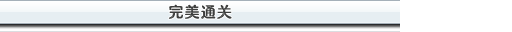
<style>
.page{position:relative;width:512px;height:32px;background:#ffffff}
.page>*{position:absolute;margin:0}
.t1{font:14.7px "FZFW-QingYinTiS-B--GB1-0";letter-spacing:0.1em;color:#3d3e3d}
</style>
<div class="page">
<p class="t1" style="left:168px;top:4px;width:64px;height:15px">完美通关</p>
</div>
